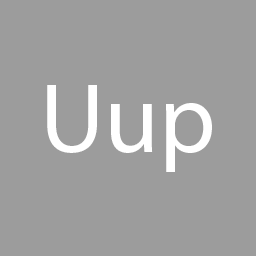
<style>
.page{position:relative;width:256px;height:256px;background:#9c9c9c}
.page>*{position:absolute;margin:0}
.t1{font:100px "MyriadPro-Regular";color:#ffffff}
</style>
<div class="page">
<p class="t1" style="left:47px;top:85px;width:165px;height:87px">Uup</p>
</div>
